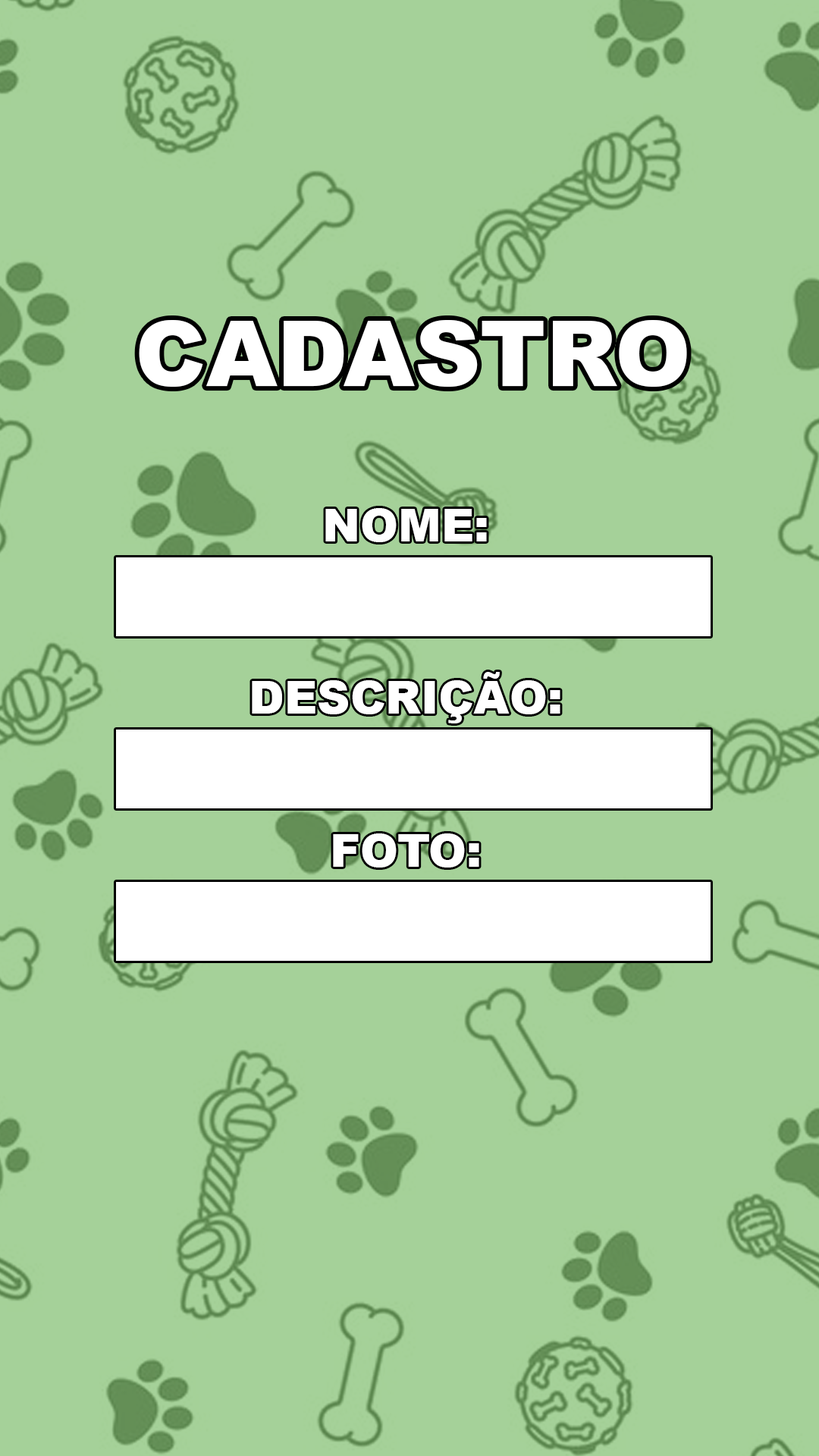
<style>
.page{position:relative;width:819px;height:1456px;background:#a5d199}
.page>*{position:absolute;margin:0}
.t1{font:91px "Arial-Black";color:#ffffff}
.t2{font:45.5px "Arial-Black";color:#ffffff}
</style>
<div class="page">
<p class="t1" style="left:139px;top:320px;width:548px;height:67px">CADASTRO</p>
<p class="t2" style="left:325px;top:508px;width:162px;height:34px">NOME:</p>
<p class="t2" style="left:252px;top:672px;width:308px;height:51px">DESCRIÇÃO:</p>
<p class="t2" style="left:333px;top:833px;width:146px;height:35px">FOTO:</p>
</div>
